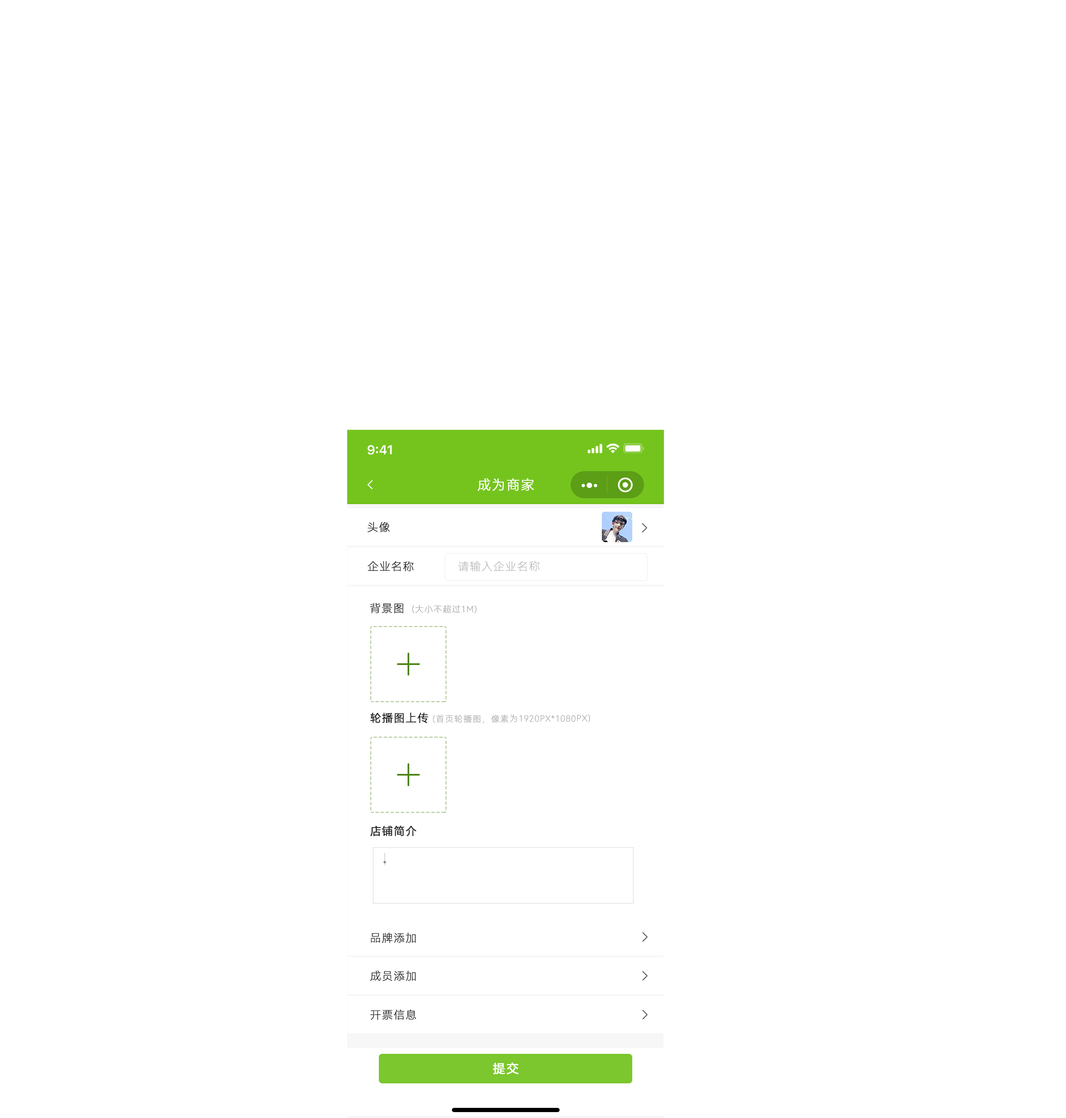
<style>
.page{position:relative;width:1066px;height:1118px;background:#ffffff}
.page>*{position:absolute;margin:0}
.t1{font:13.5px "HarmonyOS_Sans_SC_Light";letter-spacing:0.04em;color:#ffffff;text-transform:uppercase;font-weight:bold}
.t2{font:11px "HarmonyOS_Sans_SC_Thin";letter-spacing:0.04em;color:#1c1c1c;text-transform:uppercase;font-weight:bold}
.t3{font:11px "HarmonyOS_Sans_SC_Thin";letter-spacing:0.04em;color:#b9b9b9;text-transform:uppercase;font-weight:bold}
.t4{font:8.4px "HarmonyOS_Sans_SC_Thin";letter-spacing:0.04em;color:#a7a7a7;text-transform:uppercase;font-weight:bold}
.t5{font:11px "HarmonyOS_Sans_SC_Light";letter-spacing:0.04em;color:#1c1c1c;text-transform:uppercase;font-weight:bold}
.t6{font:12.7px "HarmonyOS_Sans_SC";letter-spacing:0.04em;color:#ffffff;text-transform:uppercase;font-weight:bold}
</style>
<div class="page">
<p class="t1" style="left:478px;top:478px;width:56px;height:13px">成为商家</p>
<p class="t2" style="left:367px;top:522px;width:23px;height:11px">头像</p>
<p class="t2" style="left:367px;top:561px;width:47px;height:11px">企业名称</p>
<p class="t3" style="left:458px;top:561px;width:81px;height:11px">请输入企业名称</p>
<p class="t2" style="left:370px;top:603px;width:33px;height:11px">背景图</p>
<p class="t4" style="left:412px;top:605px;width:65px;height:9px">(大小不超过1m)</p>
<p class="t5" style="left:370px;top:713px;width:58px;height:11px">轮播图上传</p>
<p class="t4" style="left:433px;top:714px;width:157px;height:10px">(首页轮播图，像素为1920px*1080px)</p>
<p class="t5" style="left:370px;top:826px;width:46px;height:11px">店铺简介</p>
<p class="t2" style="left:371px;top:933px;width:45px;height:11px">品牌添加</p>
<p class="t2" style="left:370px;top:971px;width:46px;height:11px">成员添加</p>
<p class="t2" style="left:370px;top:1010px;width:46px;height:10px">开票信息</p>
<p class="t6" style="left:493px;top:1063px;width:26px;height:12px">提交</p>
</div>
